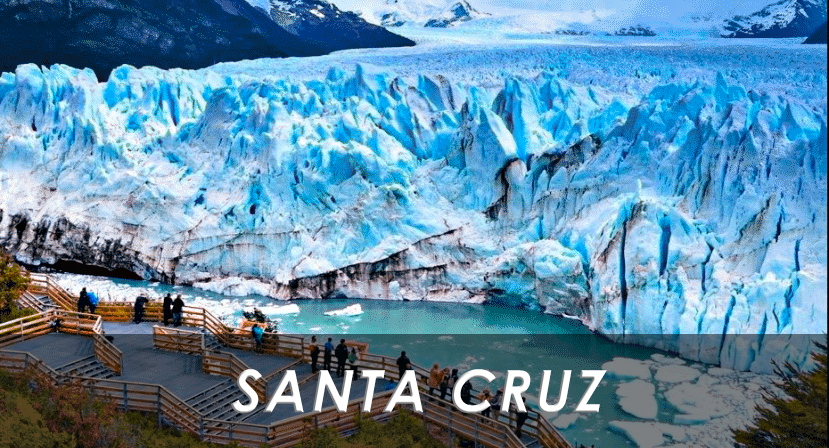
<style>
.page{position:relative;width:829px;height:448px}
.page>*{position:absolute;margin:0}
.t1{font:58.2px "CenturyGothic-Bold";letter-spacing:0.05em;color:#ffffff;font-style:italic}
</style>
<div class="page">
<p class="t1" style="left:231px;top:369px;width:376px;height:45px">SANTA CRUZ</p>
</div>
